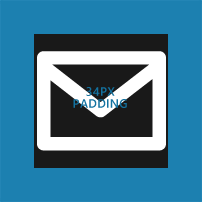
<style>
.page{position:relative;width:202px;height:202px;background:#1c80b0}
.page>*{position:absolute;margin:0}
.t1{font:12px/12px "SegoeWP-Semibold";letter-spacing:0.025em;color:#1372a0;text-transform:uppercase}
</style>
<div class="page">
<p class="t1" style="left:73px;top:87px;width:54px;height:21px;text-align:center">34px<br>padding</p>
</div>
